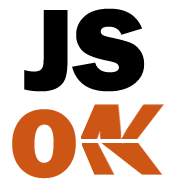
<style>
.page{position:relative;width:182px;height:182px;background:#ffffff}
.page>*{position:absolute;margin:0}
.t1{font:120px "FranklinGothic-Heavy";color:#000000}
.t2{font:100px "FranklinGothic-Heavy";color:#cd5615}
</style>
<div class="page">
<p class="t1" style="left:24px;top:8px;width:121px;height:84px">JS</p>
<p class="t2" style="left:12px;top:109px;width:64px;height:70px">O</p>
</div>
